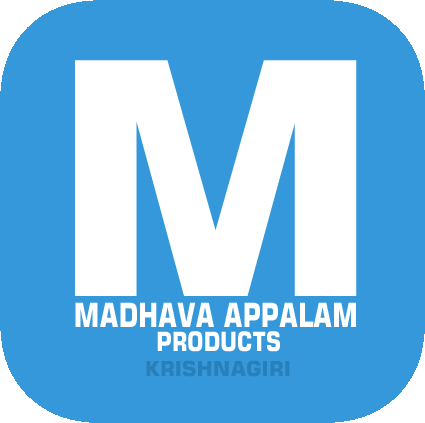
<style>
.page{position:relative;width:425px;height:423px;background:#3498db}
.page>*{position:absolute;margin:0}
.t1{font:324.2px "Square721BT-Bold";color:#ffffff}
.t2{font:33.3px "Square721BT-Bold";color:#ffffff;scale:0.76 1}
.t3{font:26.3px "Square721BT-Bold";color:#ffffff;scale:0.82 1}
.t4{font:20.7px "Square721BT-Bold";color:#2980b9}
</style>
<div class="page">
<p class="t1" style="left:75px;top:60px;width:282px;height:236px">M</p>
<p class="t2" style="left:75px;top:302px;width:281px;height:25px">MADHAVA APPALAM</p>
<p class="t3" style="left:157px;top:331px;width:123px;height:21px">PRODUCTS</p>
<p class="t4" style="left:146px;top:360px;width:144px;height:17px">KRISHNAGIRI</p>
</div>
